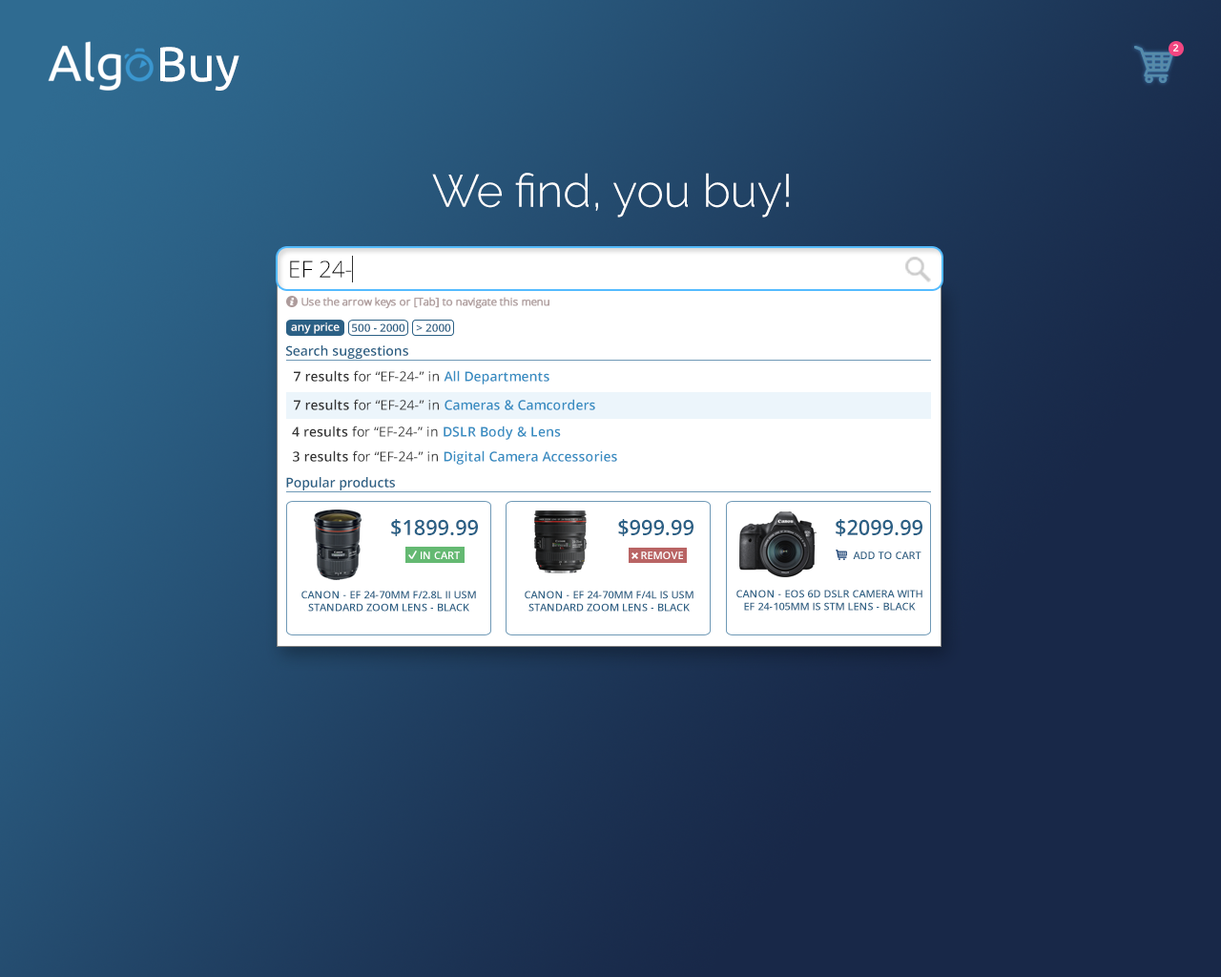
<style>
.page{position:relative;width:1221px;height:977px}
.page>*{position:absolute;margin:0}
.t1{font:49.2px "Ubuntu";color:#ffffff}
.t2{font:9.5px "OpenSans-Semibold";color:#ffffff;scale:1.08 1}
.t3{font:45.8px "Raleway-Light";color:#ffffff}
.t4{font:22.9px "OpenSans-Light";color:#000000}
.t5{font:10.1px "OpenSans-Light";color:#ad9b9b;font-weight:bold;scale:1.05 1}
.t6{font:10.9px "OpenSans-Semibold";color:#ffffff}
.t7{font:10.9px "OpenSans-Semibold";color:#2b6085}
.t8{font:13.4px "OpenSans-Semibold";color:#2b6085}
.t9{font:13.4px "OpenSans";color:#333333}
.t10{font:13.4px "OpenSans-Semibold";color:#333333}
.t11{font:13.4px "OpenSans-Semibold";color:#388dc2}
.t12{font:21px "OpenSans-Semibold";color:#2b6085}
.t13{font:10.5px "OpenSans-Semibold";color:#ffffff;text-transform:uppercase}
.t14{font:10.5px "OpenSans-Semibold";color:#2b6085;text-transform:uppercase}
</style>
<div class="page">
<p class="t1" style="left:160px;top:47px;width:79px;height:44px">Buy</p>
<p class="t2" style="left:1173px;top:44px;width:6px;height:8px">2</p>
<p class="t3" style="left:432px;top:173px;width:357px;height:44px">We find, you buy!</p>
<p class="t4" style="left:290px;top:260px;width:62px;height:18px">EF 24-</p>
<p class="t5" style="left:301px;top:297px;width:248px;height:11px">Use the arrow keys or [Tab] to navigate this menu</p>
<p class="t6" style="left:291px;top:322px;width:49px;height:12px">any price</p>
<p class="t7" style="left:352px;top:323px;width:53px;height:9px">500 - 2000</p>
<p class="t7" style="left:416px;top:323px;width:35px;height:9px">&gt; 2000</p>
<p class="t8" style="left:286px;top:345px;width:122px;height:14px">Search suggestions</p>
<p class="t9" style="left:294px;top:370px;width:255px;height:14px"><span class="t10">7 results</span> for “EF-24-” in <span class="t11">All Departments</span></p>
<p class="t11" style="left:294px;top:399px;width:301px;height:11px"><span class="t10">7 results</span><span class="t9"> for “EF-24-” in </span>Cameras &amp; Camcorders</p>
<p class="t11" style="left:292px;top:425px;width:269px;height:15px"><span class="t10">4 results</span><span class="t9"> for “EF-24-” in </span>DSLR Body &amp; Lens</p>
<p class="t11" style="left:293px;top:450px;width:324px;height:15px"><span class="t10">3 results</span><span class="t9"> for “EF-24-” in </span>Digital Camera Accessories</p>
<p class="t8" style="left:286px;top:477px;width:109px;height:13px">Popular products</p>
<p class="t12" style="left:391px;top:519px;width:87px;height:17px">$1899.99</p>
<p class="t12" style="left:618px;top:519px;width:75px;height:17px">$999.99</p>
<p class="t12" style="left:836px;top:519px;width:86px;height:17px">$2099.99</p>
<p class="t13" style="left:421px;top:551px;width:39px;height:8px">in cart</p>
<p class="t13" style="left:641px;top:551px;width:42px;height:8px">REMOVE</p>
<p class="t14" style="left:853px;top:551px;width:68px;height:8px">add to cart</p>
<p class="t14" style="left:301px;top:590px;width:175px;height:21px;text-align:center">Canon - EF 24-70mm f/2.8L II USM Standard Zoom Lens - Black</p>
<p class="t14" style="left:525px;top:590px;width:168px;height:21px;text-align:center">Canon - EF 24-70mm f/4L IS USM Standard Zoom Lens - Black</p>
<p class="t14" style="left:736px;top:589px;width:186px;height:21px;text-align:center">Canon - EOS 6D DSLR Camera with EF 24-105mm IS STM Lens - Black</p>
</div>
